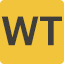
<style>
.page{position:relative;width:64px;height:64px;background:#f2c43c}
.page>*{position:absolute;margin:0}
.t1{font:42px "AppleSDGothicNeo-ExtraBold";color:#3f3e3a}
</style>
<div class="page">
<p class="t1" style="left:1px;top:16px;width:61px;height:30px">WT</p>
</div>
